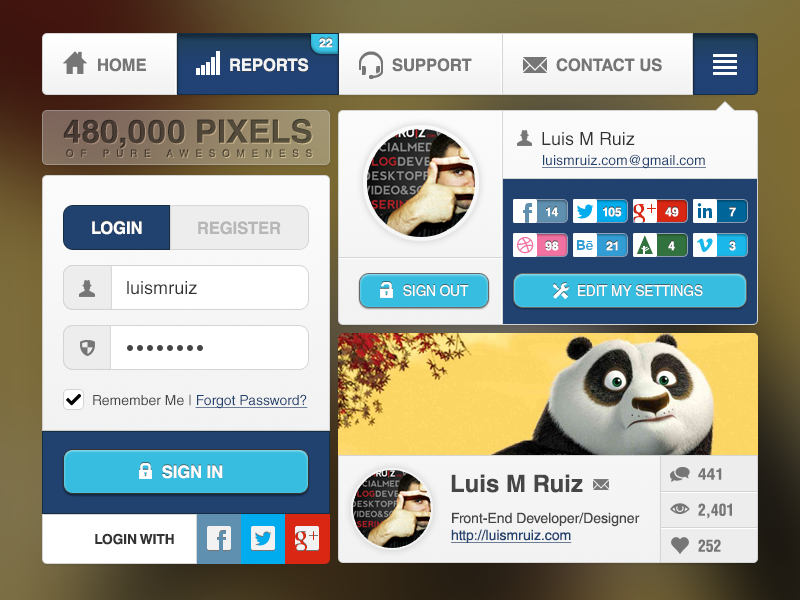
<style>
.page{position:relative;width:800px;height:600px}
.page>*{position:absolute;margin:0}
.t1{font:12px "HelveticaLTStd-Bold";color:#ffffff;text-transform:uppercase}
.t2{font:17px "HelveticaLTStd-Bold";color:#767676}
.t3{font:17px "HelveticaLTStd-Bold";color:#f3f4f6;text-transform:uppercase}
.t4{font:17px "HelveticaLTStd-Bold";color:#767676;text-transform:uppercase}
.t5{font:32.1px "HelveticaLTStd-Bold";color:#4a4035;text-transform:uppercase;scale:1.03 1}
.t6{font:18px "HelveticaLTStd-Roman";color:#333333}
.t7{font:10px "HelveticaLTStd-Roman";letter-spacing:0.71em;color:#50493b;text-transform:uppercase}
.t8{font:14px "HelveticaLTStd-Roman";color:#21416e;text-decoration:underline}
.t9{font:17px "HelveticaLTStd-Bold";color:#ffffff;text-transform:uppercase}
.t10{font:17px "HelveticaLTStd-Bold";color:#b8b7b7;text-transform:uppercase}
.t11{font:14px "HelveticaLTStd-Roman";color:#ffffff;text-transform:uppercase;scale:0.97 1}
.t12{font:14px "HelveticaLTStd-Roman";color:#464646}
.t13{font:17px "HelveticaLTStd-Bold";color:#ffffff;text-transform:uppercase;scale:0.97 1}
.t14{font:16px "HelveticaLTStd-Bold";color:#767676}
.t15{font:24px "HelveticaLTStd-Bold";color:#464646}
.t16{font:16px "HelveticaLTStd-BoldCond";color:#767676}
.t17{font:14px/17px "HelveticaLTStd-Roman";color:#464646}
.t18{font:14px/17px "HelveticaLTStd-Roman";color:#21416e;text-decoration:underline}
.t19{font:13.7px "HelveticaLTStd-Bold";color:#333333;text-transform:uppercase}
</style>
<div class="page">
<p class="t1" style="left:319px;top:38px;width:14px;height:10px">22</p>
<p class="t2" style="left:98px;top:58px;width:48px;height:14px">HOME</p>
<p class="t3" style="left:230px;top:58px;width:79px;height:14px">Reports</p>
<p class="t4" style="left:392px;top:58px;width:80px;height:14px">Support</p>
<p class="t4" style="left:556px;top:58px;width:106px;height:14px">Contact Us</p>
<p class="t5" style="left:63px;top:118px;width:249px;height:31px">480,000 PIXELS</p>
<p class="t6" style="left:542px;top:132px;width:93px;height:14px">Luis M Ruiz</p>
<p class="t7" style="left:66px;top:149px;width:246px;height:8px">oF PURE AWESOMENESS</p>
<p class="t8" style="left:542px;top:154px;width:164px;height:15px">luismruiz.com@gmail.com</p>
<p class="t1" style="left:546px;top:207px;width:12px;height:10px">14</p>
<p class="t1" style="left:603px;top:207px;width:19px;height:10px">105</p>
<p class="t1" style="left:665px;top:207px;width:14px;height:10px">49</p>
<p class="t1" style="left:729px;top:207px;width:7px;height:10px">7</p>
<p class="t9" style="left:92px;top:221px;width:50px;height:14px">Login</p>
<p class="t10" style="left:198px;top:221px;width:83px;height:14px">Register</p>
<p class="t1" style="left:545px;top:241px;width:14px;height:10px">98</p>
<p class="t1" style="left:606px;top:241px;width:12px;height:10px">21</p>
<p class="t1" style="left:668px;top:241px;width:7px;height:10px">4</p>
<p class="t1" style="left:729px;top:241px;width:7px;height:10px">3</p>
<p class="t6" style="left:127px;top:281px;width:70px;height:14px">luismruiz</p>
<p class="t11" style="left:403px;top:285px;width:66px;height:11px">SIGN out</p>
<p class="t11" style="left:578px;top:285px;width:125px;height:11px">EDIT MY SETTINGS</p>
<p class="t8" style="left:93px;top:394px;width:215px;height:15px"><span class="t12">Remember Me | </span>Forgot Password?</p>
<p class="t13" style="left:162px;top:465px;width:61px;height:14px">SIGN IN</p>
<p class="t14" style="left:698px;top:468px;width:24px;height:12px">441</p>
<p class="t15" style="left:451px;top:474px;width:132px;height:19px">Luis M Ruiz</p>
<p class="t16" style="left:698px;top:503px;width:34px;height:15px">2,401</p>
<p class="t17" style="left:451px;top:512px;width:189px;height:31px">Front-End Developer/Designer<br><span class="t18">http://luismruiz.com</span></p>
<p class="t19" style="left:95px;top:533px;width:79px;height:12px">Login with</p>
<p class="t16" style="left:698px;top:539px;width:23px;height:13px">252</p>
</div>
